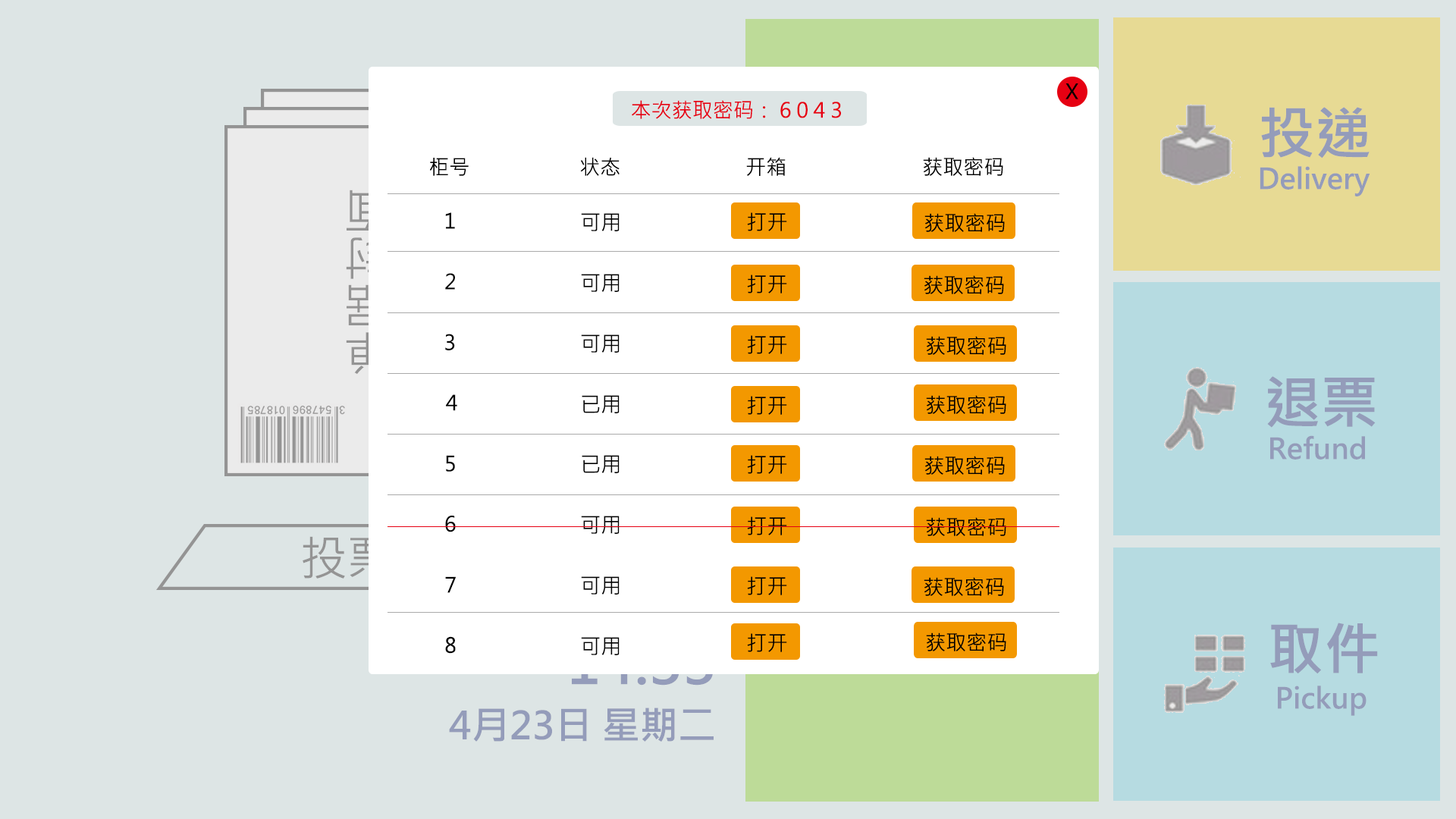
<style>
.page{position:relative;width:1456px;height:819px;background:#dde5e5}
.page>*{position:absolute;margin:0}
.t1{font:20.5px "MicrosoftJhengHeiRegular";color:#000000}
.t2{font:20.5px "MicrosoftJhengHeiRegular";color:#e60012}
.t3{font:56.9px "MicrosoftJhengHeiBold";color:#949cba}
.t4{font:28.4px "MicrosoftJhengHeiBold";color:#949cba}
.t5{font:47.4px "MicrosoftJhengHeiRegular"}
.t6{font:37.9px "MicrosoftJhengHeiBold";color:#949cba}
</style>
<div class="page">
<p class="t1" style="left:1065px;top:83px;width:13px;height:16px">X</p>
<p class="t2" style="left:632px;top:100px;width:209px;height:19px">本次获取密码： 6 0 4 3</p>
<p class="t3" style="left:1261px;top:107px;width:109px;height:51px">投递</p>
<p class="t1" style="left:430px;top:158px;width:39px;height:18px">柜号</p>
<p class="t1" style="left:580px;top:157px;width:40px;height:19px">状态</p>
<p class="t1" style="left:746px;top:157px;width:40px;height:19px">开箱</p>
<p class="t1" style="left:923px;top:157px;width:80px;height:19px">获取密码</p>
<p class="t4" style="left:1260px;top:166px;width:110px;height:30px">Delivery</p>
<p class="t5" style="left:346px;top:190px;width:43px;height:185px;rotate:180deg">单据封面</p>
<p class="t1" style="left:445px;top:212px;width:10px;height:17px">1</p>
<p class="t1" style="left:581px;top:213px;width:39px;height:18px">可用</p>
<p class="t1" style="left:445px;top:273px;width:10px;height:17px">2</p>
<p class="t1" style="left:581px;top:274px;width:39px;height:18px">可用</p>
<p class="t1" style="left:445px;top:334px;width:10px;height:16px">3</p>
<p class="t1" style="left:581px;top:334px;width:39px;height:19px">可用</p>
<p class="t3" style="left:1267px;top:376px;width:109px;height:52px">退票</p>
<p class="t1" style="left:446px;top:394px;width:11px;height:17px">4</p>
<p class="t1" style="left:582px;top:395px;width:38px;height:18px">已用</p>
<p class="t4" style="left:1270px;top:435px;width:95px;height:25px">Refund</p>
<p class="t1" style="left:446px;top:455px;width:9px;height:17px">5</p>
<p class="t1" style="left:582px;top:455px;width:38px;height:18px">已用</p>
<p class="t1" style="left:445px;top:515px;width:11px;height:17px">6</p>
<p class="t1" style="left:581px;top:516px;width:39px;height:18px">可用</p>
<p class="t5" style="left:303px;top:536px;width:132px;height:43px">投票口</p>
<p class="t1" style="left:445px;top:576px;width:11px;height:17px">7</p>
<p class="t1" style="left:581px;top:576px;width:39px;height:19px">可用</p>
<p class="t3" style="left:1270px;top:623px;width:108px;height:51px">取件</p>
<p class="t1" style="left:445px;top:636px;width:11px;height:18px">8</p>
<p class="t1" style="left:581px;top:637px;width:39px;height:18px">可用</p>
<p class="t4" style="left:1278px;top:686px;width:88px;height:30px">Pickup</p>
<p class="t6" style="left:449px;top:708px;width:265px;height:34px">4月23日 星期二</p>
</div>
